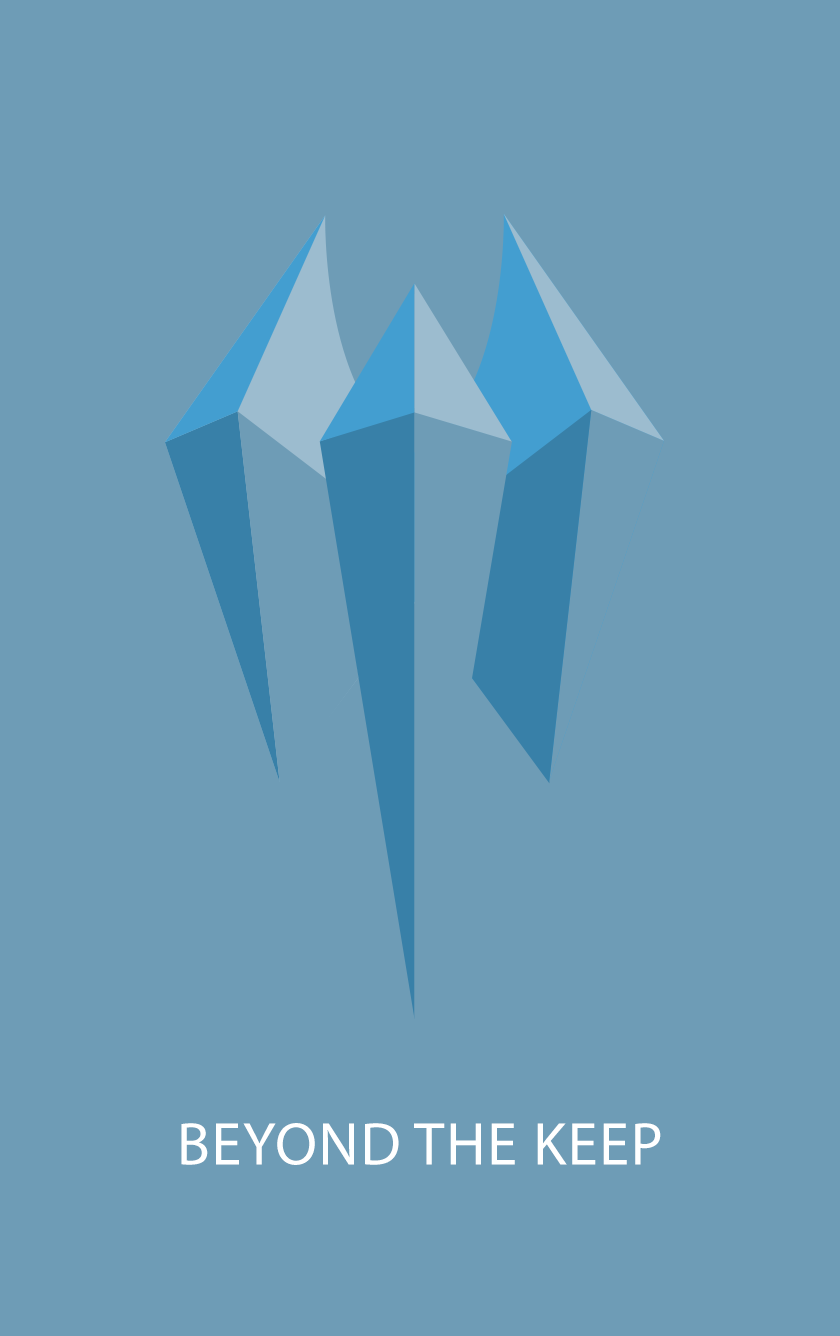
<style>
.page{position:relative;width:840px;height:1336px;background:#6e9cb6}
.page>*{position:absolute;margin:0}
.t1{font:60.9px "MyriadPro-Regular";letter-spacing:0.025em;color:#ffffff}
</style>
<div class="page">
<p class="t1" style="left:181px;top:1123px;width:480px;height:42px">BEYOND THE KEEP</p>
</div>
